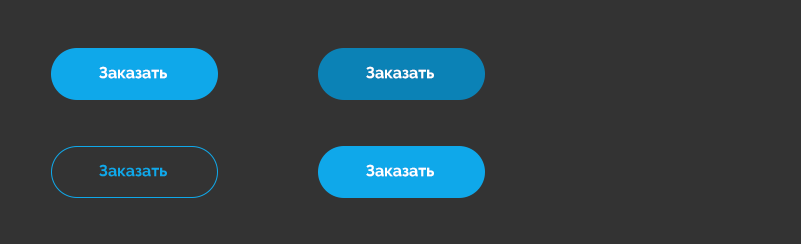
<style>
.page{position:relative;width:801px;height:244px;background:#333333}
.page>*{position:absolute;margin:0}
.t1{font:16px "Raleway-Bold";color:#ffffff}
.t2{font:16px "Raleway-Bold";color:#0fa8ea}
</style>
<div class="page">
<p class="t1" style="left:99px;top:66px;width:68px;height:13px">Заказать</p>
<p class="t1" style="left:366px;top:66px;width:68px;height:13px">Заказать</p>
<p class="t2" style="left:99px;top:164px;width:68px;height:13px">Заказать</p>
<p class="t1" style="left:366px;top:164px;width:68px;height:13px">Заказать</p>
</div>
